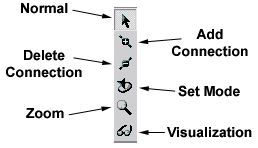
<style>
.page{position:relative;width:258px;height:148px;background:#ffffff}
.page>*{position:absolute;margin:0}
.t1{font:14px "Arial-BoldMT";color:#000000}
</style>
<div class="page">
<p class="t1" style="left:21px;top:3px;width:47px;height:11px">Normal</p>
<p class="t1" style="left:172px;top:29px;width:76px;height:28px;text-align:center">Add<br>Connection</p>
<p class="t1" style="left:6px;top:50px;width:76px;height:28px;text-align:center">Delete<br>Connection</p>
<p class="t1" style="left:178px;top:85px;width:62px;height:12px">Set Mode</p>
<p class="t1" style="left:26px;top:108px;width:38px;height:11px">Zoom</p>
<p class="t1" style="left:167px;top:127px;width:85px;height:11px">Visualization</p>
</div>
